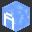
<style>
.page{position:relative;width:32px;height:32px;background:#333333}
.page>*{position:absolute;margin:0}
.t1{font:16px "Minecraft";color:#ffffff;scale:1.12 1}
</style>
<div class="page">
<p class="t1" style="left:4px;top:12px;width:10px;height:18px;rotate:27deg">A</p>
</div>
